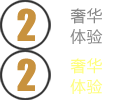
<style>
.page{position:relative;width:121px;height:100px;background:#ffffff}
.page>*{position:absolute;margin:0}
.t1{font:15.5px/21px "MicrosoftYaHei";letter-spacing:0.05em;color:#878787}
.t2{font:15.5px/21px "MicrosoftYaHei";letter-spacing:0.05em;color:#fffe7c}
</style>
<div class="page">
<p class="t1" style="left:70px;top:8px;width:33px;height:36px">奢华<br>体验</p>
<p class="t2" style="left:70px;top:58px;width:33px;height:36px">奢华<br>体验</p>
</div>
